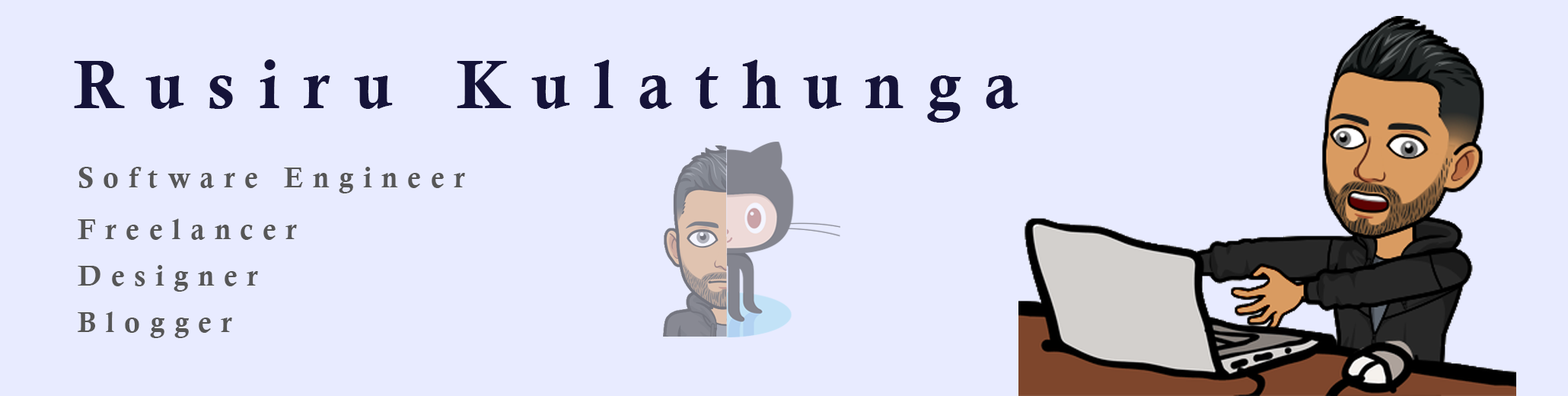
<style>
.page{position:relative;width:1568px;height:396px;background:#e8ebff}
.page>*{position:absolute;margin:0}
.t1{font:68.5px "CalisMTBol";letter-spacing:0.34em;color:#151339}
.t2{font:28.5px "CalisMTBol";letter-spacing:0.34em;color:#565656}
</style>
<div class="page">
<p class="t1" style="left:74px;top:59px;width:944px;height:64px">Rusiru Kulathunga</p>
<p class="t2" style="left:78px;top:167px;width:387px;height:26px">Software Engineer</p>
<p class="t2" style="left:78px;top:218px;width:219px;height:22px">Freelancer</p>
<p class="t2" style="left:78px;top:265px;width:180px;height:27px">Designer</p>
<p class="t2" style="left:78px;top:311px;width:154px;height:27px">Blogger</p>
</div>
